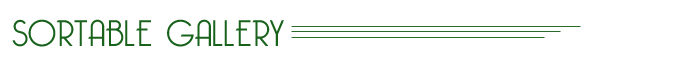
<style>
.page{position:relative;width:700px;height:62px;background:#ffffff}
.page>*{position:absolute;margin:0}
.t1{font:36px "BelleroseLight";color:#19621c}
</style>
<div class="page">
<p class="t1" style="left:12px;top:19px;width:272px;height:28px">SORTABLE GALLERY</p>
</div>
